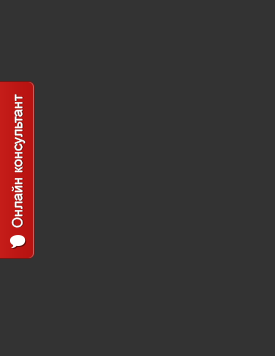
<style>
.page{position:relative;width:275px;height:356px;background:#333333}
.page>*{position:absolute;margin:0}
.t1{font:14px "ArialMT";color:#ffffff}
</style>
<div class="page">
<p class="t1" style="left:11px;top:94px;width:15px;height:134px;rotate:-90deg">Онлайн консультант</p>
</div>
